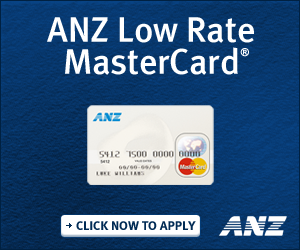
<style>
.page{position:relative;width:300px;height:250px}
.page>*{position:absolute;margin:0}
.t1{font:36px/32px "MetaMediumLF-Roman";color:#ffffff}
.t2{font:11px "ArialMT";letter-spacing:-0.02em;color:#ffffff;font-weight:bold}
.t3{font:13px "MetaBoldLF-Roman";color:#012b55}
</style>
<div class="page">
<p class="t1" style="left:47px;top:17px;width:207px;height:58px;text-align:center">ANZ Low Rate<br>MasterCard</p>
<p class="t2" style="left:240px;top:48px;width:9px;height:9px">®</p>
<p class="t3" style="left:76px;top:221px;width:120px;height:9px">CLICK NOW TO APPLY NOW</p>
</div>
